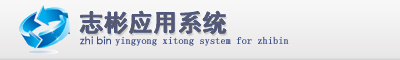
<style>
.page{position:relative;width:400px;height:60px}
.page>*{position:absolute;margin:0}
.t1{font:24px "SimHei";color:#444a5a;font-weight:bold}
.t2{font:10px "SimSun";color:#3f5289;font-weight:bold}
.t3{font:10px "CenturyGothic";color:#3f5289;font-weight:bold}
</style>
<div class="page">
<p class="t1" style="left:80px;top:11px;width:146px;height:23px">志彬应用系统</p>
<p class="t2" style="left:80px;top:36px;width:209px;height:10px"><span class="t3">zhi bin </span>yingyong xitong system for zhibin</p>
</div>
